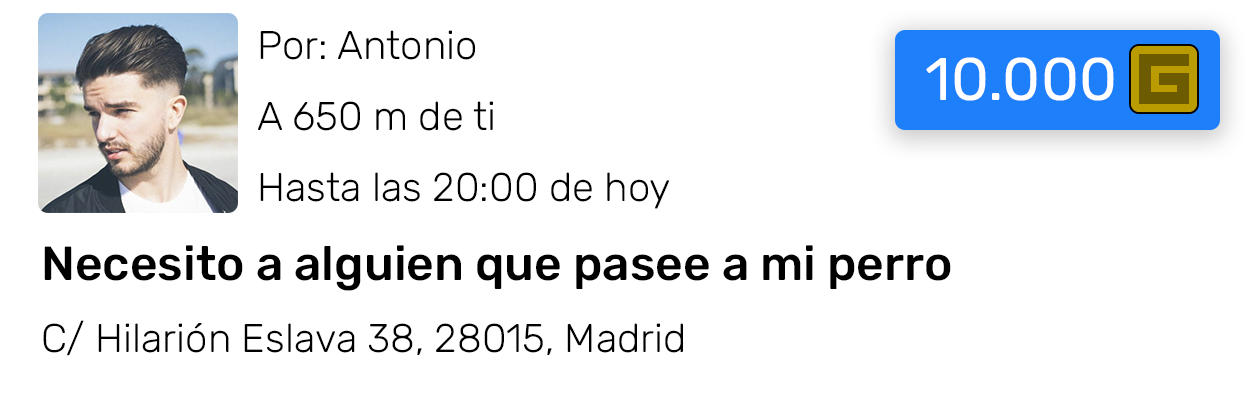
<style>
.page{position:relative;width:1250px;height:400px;background:#ffffff}
.page>*{position:absolute;margin:0}
.t1{font:40px "Rubik-Light";color:#000000}
.t2{font:10px "Roboto-Regular";color:#000000}
.t3{font:48px "Rubik-Medium";color:#000000}
.t4{font:60px "Rubik-Regular";color:#ffffff}
</style>
<div class="page">
<p class="t1" style="left:43px;top:30px;width:908px;height:326px"><span class="t2">      </span>Por: Antonio<br><br><br>      A 650 m de ti<br><br><br>      Hasta las 20:00 de hoy<br><br><br><span class="t3">Necesito a alguien que pasee a mi perro<br><br></span>C/ Hilarión Eslava 38, 28015, Madrid</p>
<p class="t4" style="left:926px;top:57px;width:188px;height:44px">10.000</p>
</div>
